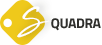
<style>
.page{position:relative;width:102px;height:45px;background:#ffffff}
.page>*{position:absolute;margin:0}
.t1{font:35.1px "HighTide";letter-spacing:-0.05em;color:#ffffff}
.t2{font:14px "Titillium-Bold";letter-spacing:-0.03em;color:#2f2f2c;text-transform:uppercase}
</style>
<div class="page">
<p class="t1" style="left:17px;top:6px;width:33px;height:32px">S</p>
<p class="t2" style="left:51px;top:18px;width:50px;height:13px">Quadra</p>
</div>
